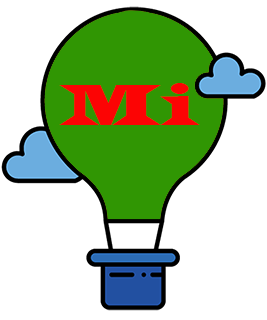
<style>
.page{position:relative;width:267px;height:320px;background:#ffffff}
.page>*{position:absolute;margin:0}
.t1{font:60px "LatinWide";color:#fc0404}
</style>
<div class="page">
<p class="t1" style="left:59px;top:83px;width:141px;height:42px">Mi</p>
</div>
